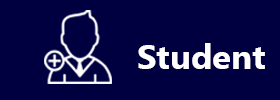
<style>
.page{position:relative;width:280px;height:100px;background:#000040}
.page>*{position:absolute;margin:0}
.t1{font:34.1px "Gadugi-Bold";color:#ffffff}
</style>
<div class="page">
<p class="t1" style="left:138px;top:43px;width:127px;height:26px">Student</p>
</div>
